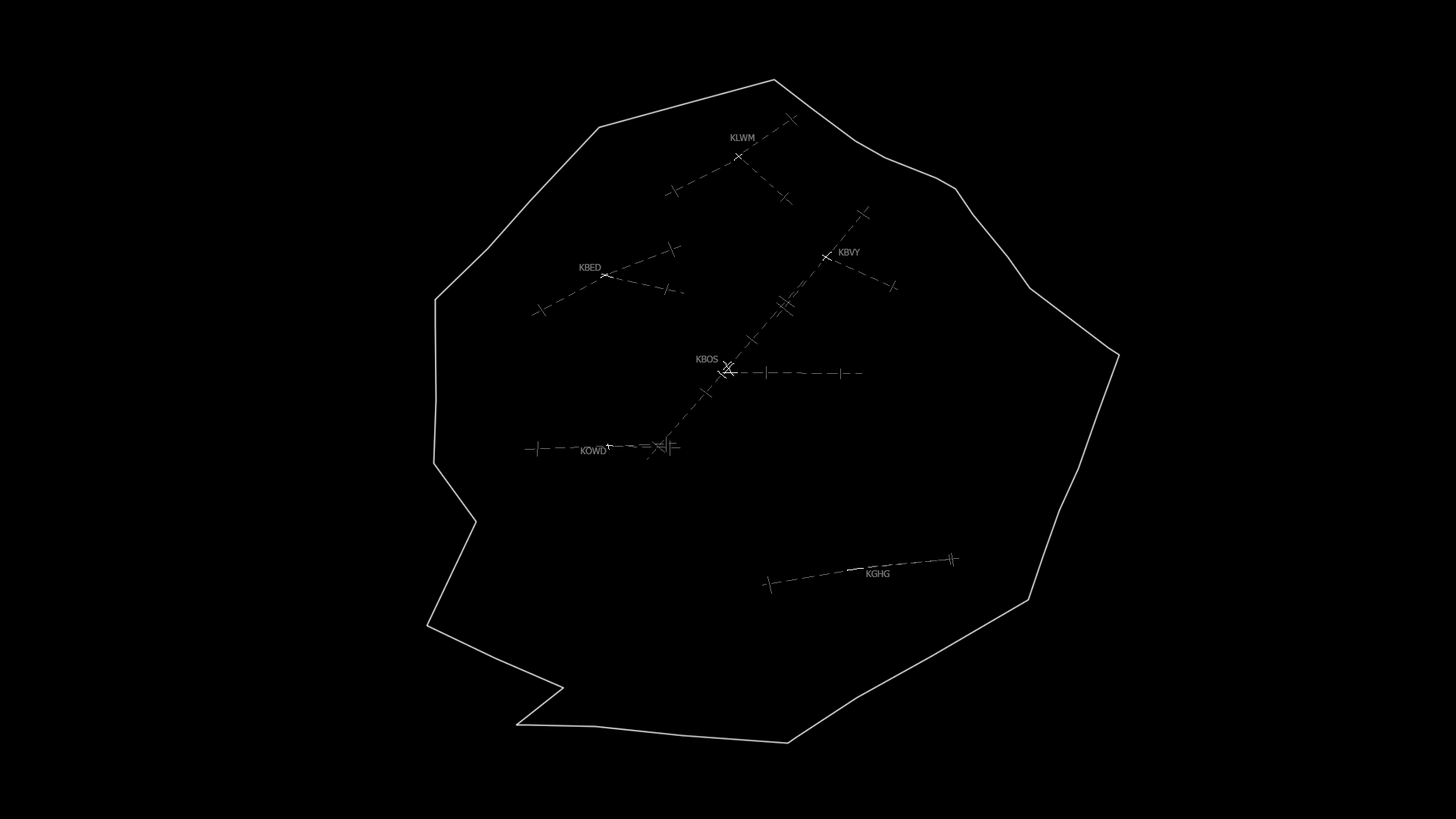
<style>
.page{position:relative;width:1456px;height:819px;background:#010000}
.page>*{position:absolute;margin:0}
.t1{font:9.1px "Tahoma";color:#757575}
</style>
<div class="page">
<p class="t1" style="left:730px;top:134px;width:25px;height:7px">KLWM</p>
<p class="t1" style="left:839px;top:249px;width:21px;height:7px">KBVY</p>
<p class="t1" style="left:579px;top:264px;width:22px;height:7px">KBED</p>
<p class="t1" style="left:696px;top:356px;width:22px;height:6px">KBOS</p>
<p class="t1" style="left:581px;top:447px;width:26px;height:7px">KOWD</p>
<p class="t1" style="left:866px;top:570px;width:24px;height:7px">KGHG</p>
</div>
